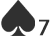
<style>
.page{position:relative;width:52px;height:36px;background:#ffffff}
.page>*{position:absolute;margin:0}
.t1{font:23.4px "MyriadPro-Regular";letter-spacing:-0.1em;color:#303030;font-weight:bold}
</style>
<div class="page">
<p class="t1" style="left:39px;top:19px;width:11px;height:17px">7</p>
</div>
